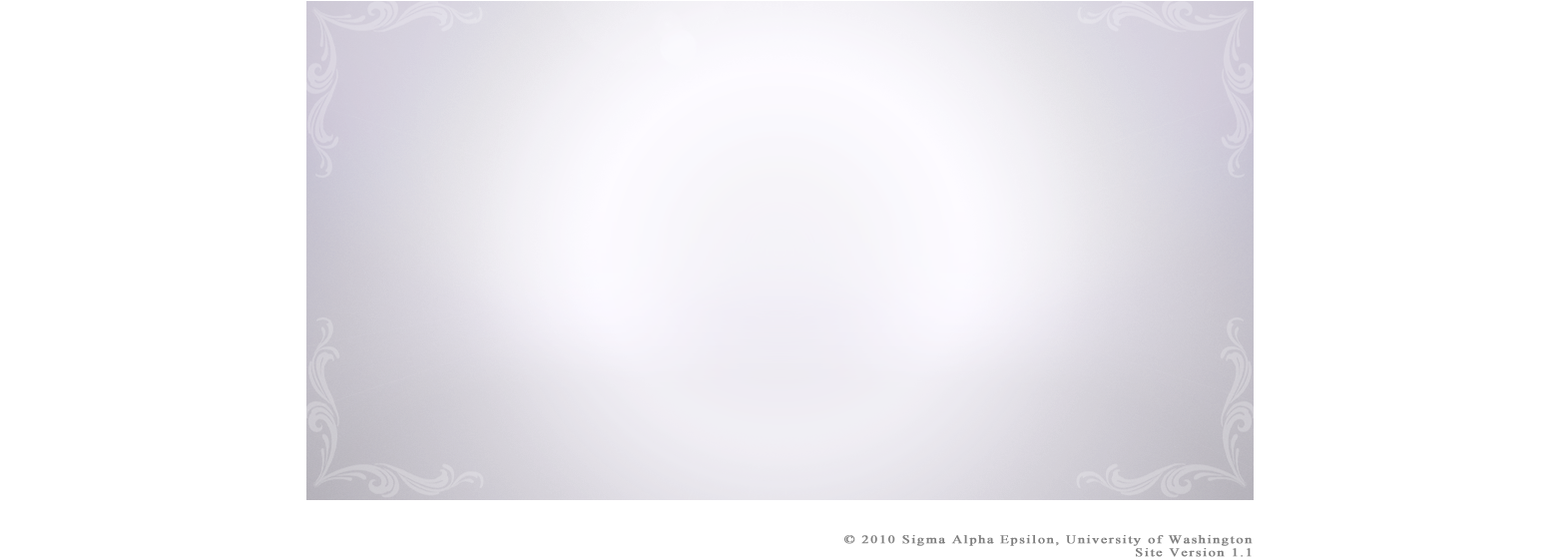
<style>
.page{position:relative;width:1568px;height:557px;background:#ffffff}
.page>*{position:absolute;margin:0}
.t1{font:11.2px "TimesNewRomanPSMT";letter-spacing:0.1em;color:#7f7f7f;font-weight:bold;scale:1.25 1}
</style>
<div class="page">
<p class="t1" style="left:844px;top:535px;width:409px;height:11px">© 2010 Sigma Alpha Epsilon, University of Washington</p>
<p class="t1" style="left:1136px;top:548px;width:116px;height:9px">Site Version 1.1</p>
</div>
